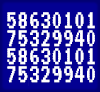
<style>
.page{position:relative;width:100px;height:92px;background:#030092}
.page>*{position:absolute;margin:0}
.t1{font:27px/18px "VT323-Regular";letter-spacing:0.005em;color:#ffffff}
</style>
<div class="page">
<p class="t1" style="left:7px;top:12px;width:88px;height:71px">58630101<br>75329940<br>58630101<br>75329940</p>
</div>
